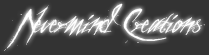
<style>
.page{position:relative;width:209px;height:55px;background:#333333}
.page>*{position:absolute;margin:0}
.t1{font:48px "aThemeformurder";color:#ffffff}
</style>
<div class="page">
<p class="t1" style="left:4px;top:3px;width:201px;height:48px">Nevermind Creations</p>
</div>
